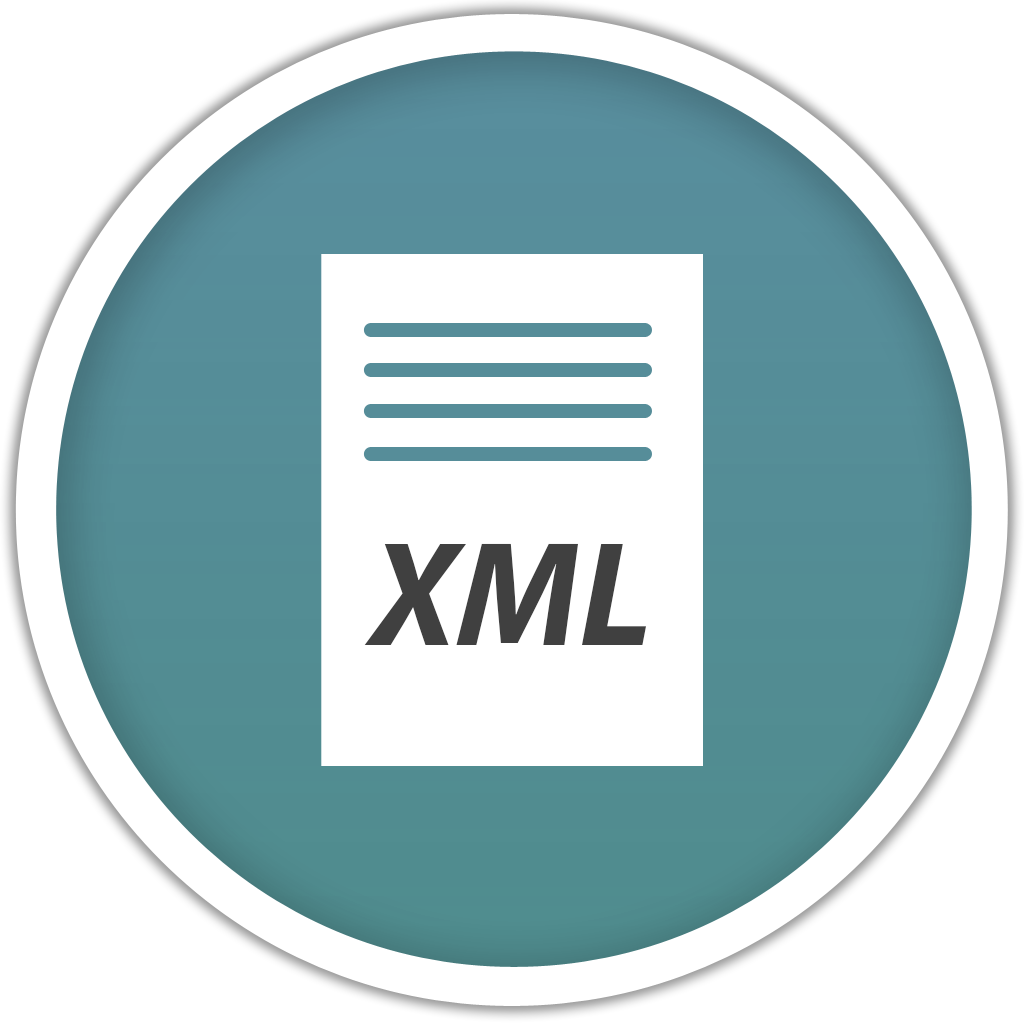
<style>
.page{position:relative;width:1024px;height:1024px;background:#ffffff}
.page>*{position:absolute;margin:0}
.t1{font:150px "MyriadPro-BoldIt";color:#404040}
</style>
<div class="page">
<p class="t1" style="left:364px;top:543px;width:282px;height:102px">XML</p>
</div>
